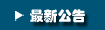
<style>
.page{position:relative;width:105px;height:30px;background:#005476}
.page>*{position:absolute;margin:0}
.t1{font:14px "STHupo";color:#ffffff}
</style>
<div class="page">
<p class="t1" style="left:30px;top:9px;width:55px;height:14px">最新公告</p>
</div>
